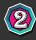
<style>
.page{position:relative;width:36px;height:40px;background:#333333}
.page>*{position:absolute;margin:0}
.t1{font:24.7px "Algerian";color:#ffffff}
</style>
<div class="page">
<p class="t1" style="left:14px;top:10px;width:13px;height:18px">2</p>
</div>
